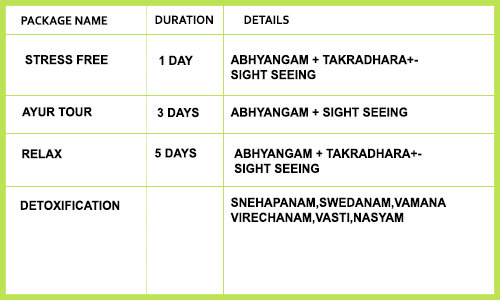
<style>
.page{position:relative;width:500px;height:300px;background:#ffffff}
.page>*{position:absolute;margin:0}
.t1{font:12.5px "Corbel-Bold";letter-spacing:0.005em;color:#000000;scale:0.95 1}
.t2{font:12.5px "Arial-BoldMT";letter-spacing:0.005em;color:#000000;scale:0.95 1}
</style>
<div class="page">
<p class="t1" style="left:21px;top:16px;width:87px;height:9px">PACKAGE NAME</p>
<p class="t1" style="left:155px;top:15px;width:58px;height:9px">DURATION</p>
<p class="t1" style="left:244px;top:15px;width:45px;height:9px">DETAILS</p>
<p class="t2" style="left:25px;top:54px;width:83px;height:11px">STRESS FREE</p>
<p class="t2" style="left:230px;top:54px;width:188px;height:26px">ABHYANGAM + TAKRADHARA+SIGHT SEEING</p>
<p class="t2" style="left:159px;top:55px;width:34px;height:10px">1 DAY</p>
<p class="t2" style="left:22px;top:107px;width:71px;height:10px">AYUR TOUR</p>
<p class="t2" style="left:157px;top:107px;width:42px;height:11px">3 DAYS</p>
<p class="t2" style="left:230px;top:107px;width:178px;height:10px">ABHYANGAM + SIGHT SEEING</p>
<p class="t2" style="left:22px;top:149px;width:40px;height:10px">RELAX</p>
<p class="t2" style="left:155px;top:148px;width:42px;height:10px">5 DAYS</p>
<p class="t2" style="left:234px;top:148px;width:188px;height:25px">ABHYANGAM + TAKRADHARA+SIGHT SEEING</p>
<p class="t2" style="left:230px;top:197px;width:216px;height:27px">SNEHAPANAM,SWEDANAM,VAMANA<br>VIRECHANAM,VASTI,NASYAM</p>
<p class="t2" style="left:20px;top:200px;width:100px;height:10px">DETOXIFICATION</p>
</div>
